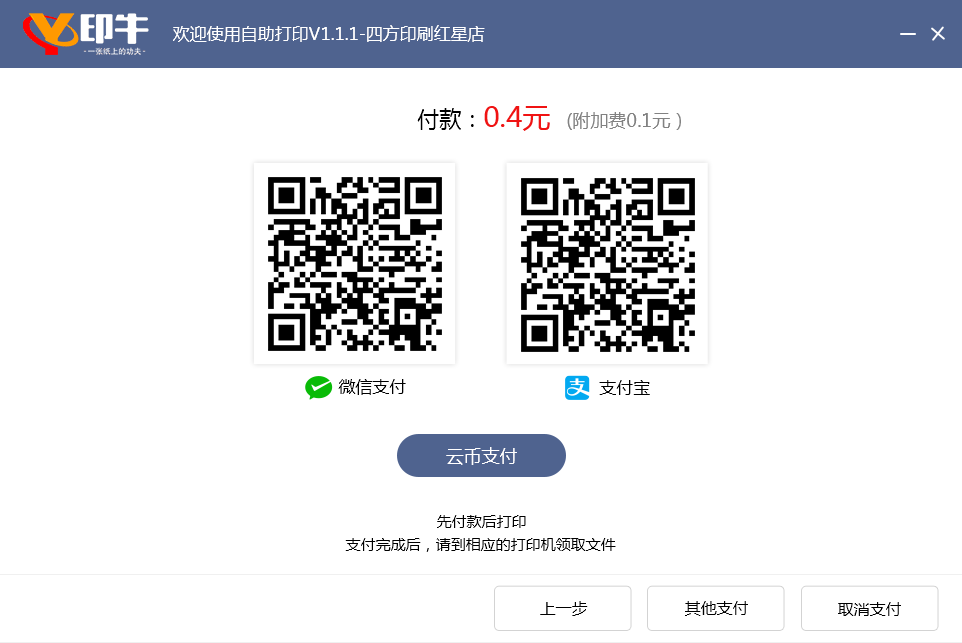
<style>
.page{position:relative;width:962px;height:643px;background:#ffffff}
.page>*{position:absolute;margin:0}
.t1{font:17px "MicrosoftYaHei";color:#ffffff}
.t2{font:18px "MicrosoftYaHei";color:#828282}
.t3{font:22px "MicrosoftYaHei";color:#000000}
.t4{font:28px "MicrosoftYaHei";color:#f01313}
.t5{font:17px "MicrosoftYaHei";color:#000000}
.t6{font:18px "MicrosoftYaHei";color:#ffffff}
.t7{font:15px "MicrosoftYaHei";color:#000000}
.t8{font:16px "MicrosoftYaHei";color:#000000}
</style>
<div class="page">
<p class="t1" style="left:173px;top:25px;width:312px;height:17px">欢迎使用自助打印V1.1.1-四方印刷红星店</p>
<p class="t2" style="left:417px;top:106px;width:264px;height:25px"><span class="t3">付款：</span><span class="t4">0.4元  </span>(附加费0.1元）</p>
<p class="t5" style="left:338px;top:379px;width:68px;height:16px">微信支付</p>
<p class="t5" style="left:599px;top:380px;width:51px;height:15px">支付宝</p>
<p class="t6" style="left:446px;top:447px;width:71px;height:18px">云币支付</p>
<p class="t7" style="left:437px;top:515px;width:89px;height:13px">先付款后打印</p>
<p class="t7" style="left:345px;top:538px;width:271px;height:14px">支付完成后，请到相应的打印机领取文件</p>
<p class="t8" style="left:540px;top:601px;width:48px;height:15px">上一步</p>
<p class="t8" style="left:685px;top:601px;width:63px;height:15px">其他支付</p>
<p class="t8" style="left:838px;top:602px;width:63px;height:14px">取消支付</p>
</div>
